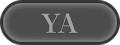
<style>
.page{position:relative;width:120px;height:45px;background:#4c4c4c}
.page>*{position:absolute;margin:0}
.t1{font:26px "RyuminPro-ExBold";letter-spacing:-0.08em;color:#a1a1a1}
</style>
<div class="page">
<p class="t1" style="left:41px;top:13px;width:37px;height:20px">YA</p>
</div>
